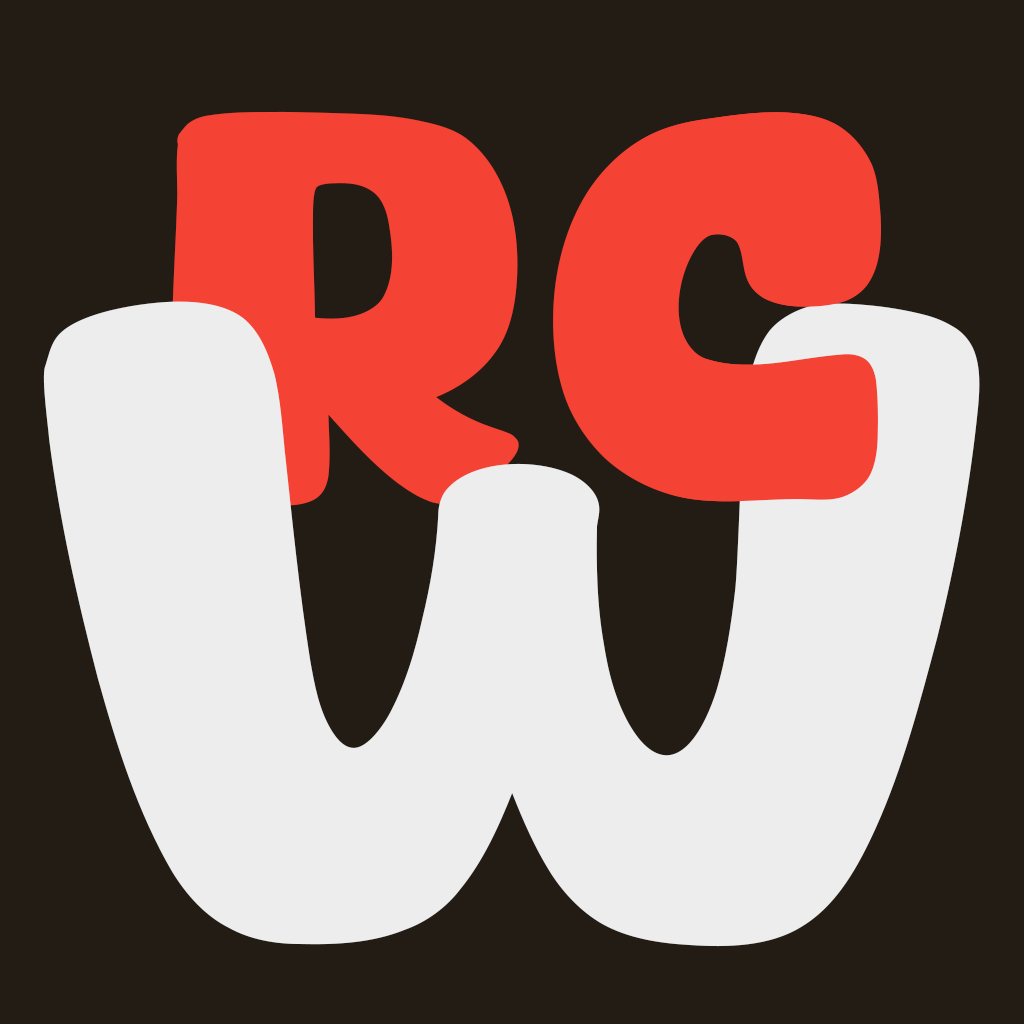
<style>
.page{position:relative;width:1024px;height:1024px;background:#221c14}
.page>*{position:absolute;margin:0}
.t1{font:512px "Dino-Care";color:#f44235}
.t2{font:853.3px "Dino-Care";color:#ededed}
</style>
<div class="page">
<p class="t1" style="left:167px;top:111px;width:713px;height:395px">RC</p>
<p class="t1" style="left:554px;top:112px;width:327px;height:390px">C</p>
<p class="t2" style="left:43px;top:301px;width:937px;height:646px">W</p>
</div>
